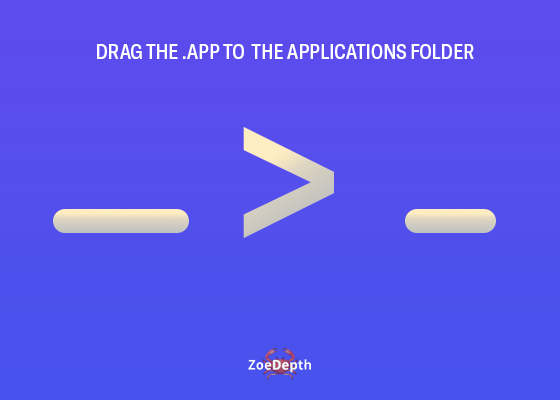
<style>
.page{position:relative;width:560px;height:400px}
.page>*{position:absolute;margin:0}
.t1{font:20.9px "GTAmerica-CondensedMedium";color:#ffffff;text-transform:uppercase;scale:0.96 1}
.t2{font:239px "GTAmerica-CondensedMedium";text-transform:uppercase;scale:0.96 1}
</style>
<div class="page">
<p class="t1" style="left:97px;top:44px;width:377px;height:15px">Drag the .app to  the applications folder</p>
<p class="t2" style="left:243px;top:127px;width:91px;height:111px">&gt;</p>
</div>
